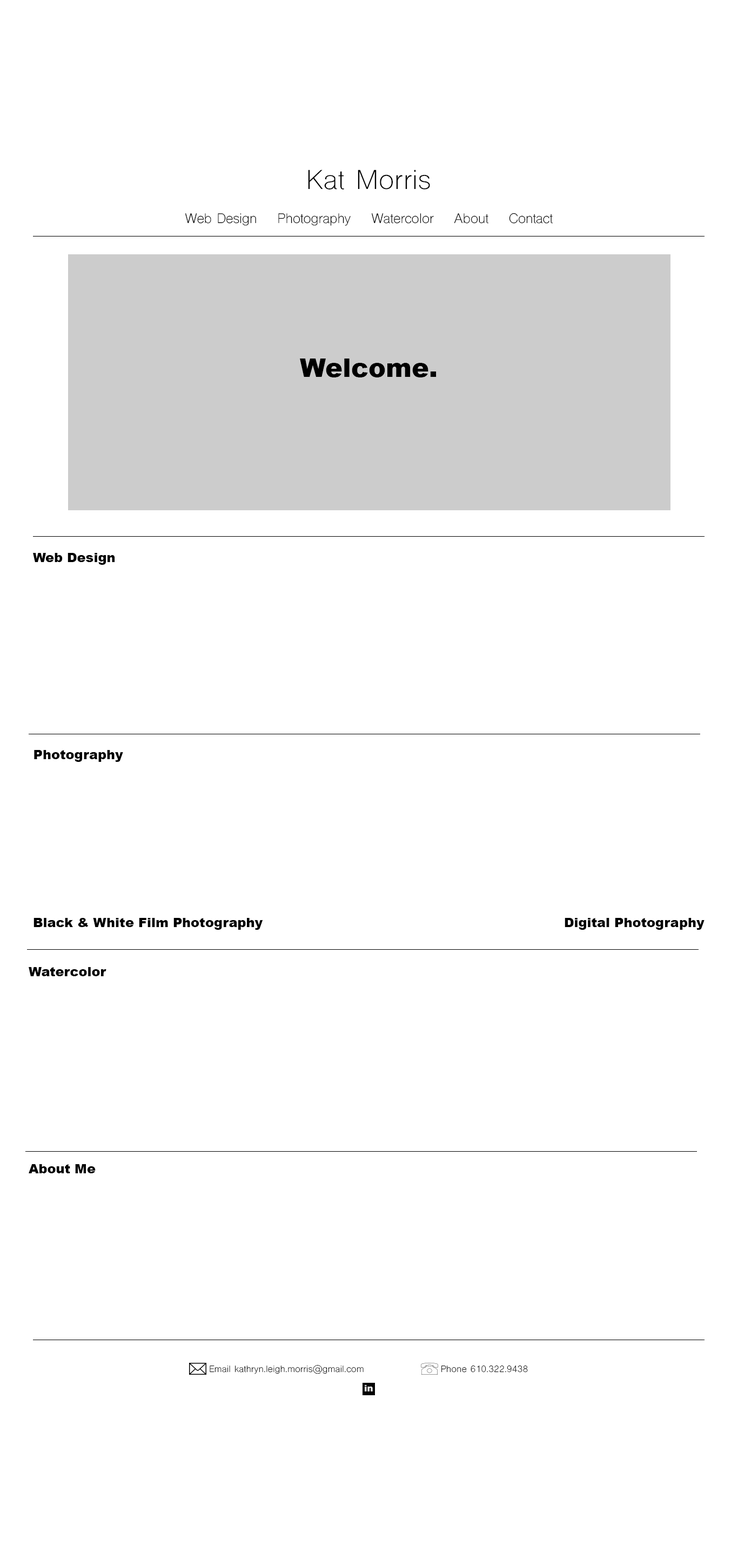
<style>
.page{position:relative;width:738px;height:1568px;background:#ffffff}
.page>*{position:absolute;margin:0}
.t1{font:25.9px "ShreeDev0714";letter-spacing:0.025em;color:#000000}
.t2{font:13px "ShreeDev0714";color:#000000}
.t3{font:25.9px "Arial-Black";color:#000000}
.t4{font:13px "Arial-Black";color:#000000}
.t5{font:8.6px/19.4px "ShreeDev0714";letter-spacing:0.025em;color:#ffffff}
.t6{font:8.6px/19.4px "Arial-Black";letter-spacing:0.025em;color:#ffffff}
</style>
<div class="page">
<p class="t1" style="left:308px;top:170px;width:122px;height:20px">Kat Morris</p>
<p class="t2" style="left:185px;top:213px;width:368px;height:13px">Web Design    Photography    Watercolor    About    Contact</p>
<p class="t3" style="left:300px;top:359px;width:136px;height:18px">Welcome.</p>
<p class="t4" style="left:33px;top:553px;width:82px;height:12px">Web Design</p>
<p class="t4" style="left:34px;top:750px;width:89px;height:12px">Photography</p>
<p class="t4" style="left:33px;top:918px;width:230px;height:12px">Black &amp; White Film Photography</p>
<p class="t4" style="left:564px;top:918px;width:140px;height:12px">Digital Photography</p>
<p class="t4" style="left:29px;top:967px;width:77px;height:9px">Watercolor</p>
<p class="t4" style="left:29px;top:1164px;width:67px;height:9px">About Me</p>
<p class="t5" style="left:209px;top:1365px;width:319px;height:26px;text-align:center">Email kathryn.leigh.morris@gmail.com                     Phone 610.322.9438<br><span class="t6">in</span></p>
</div>
